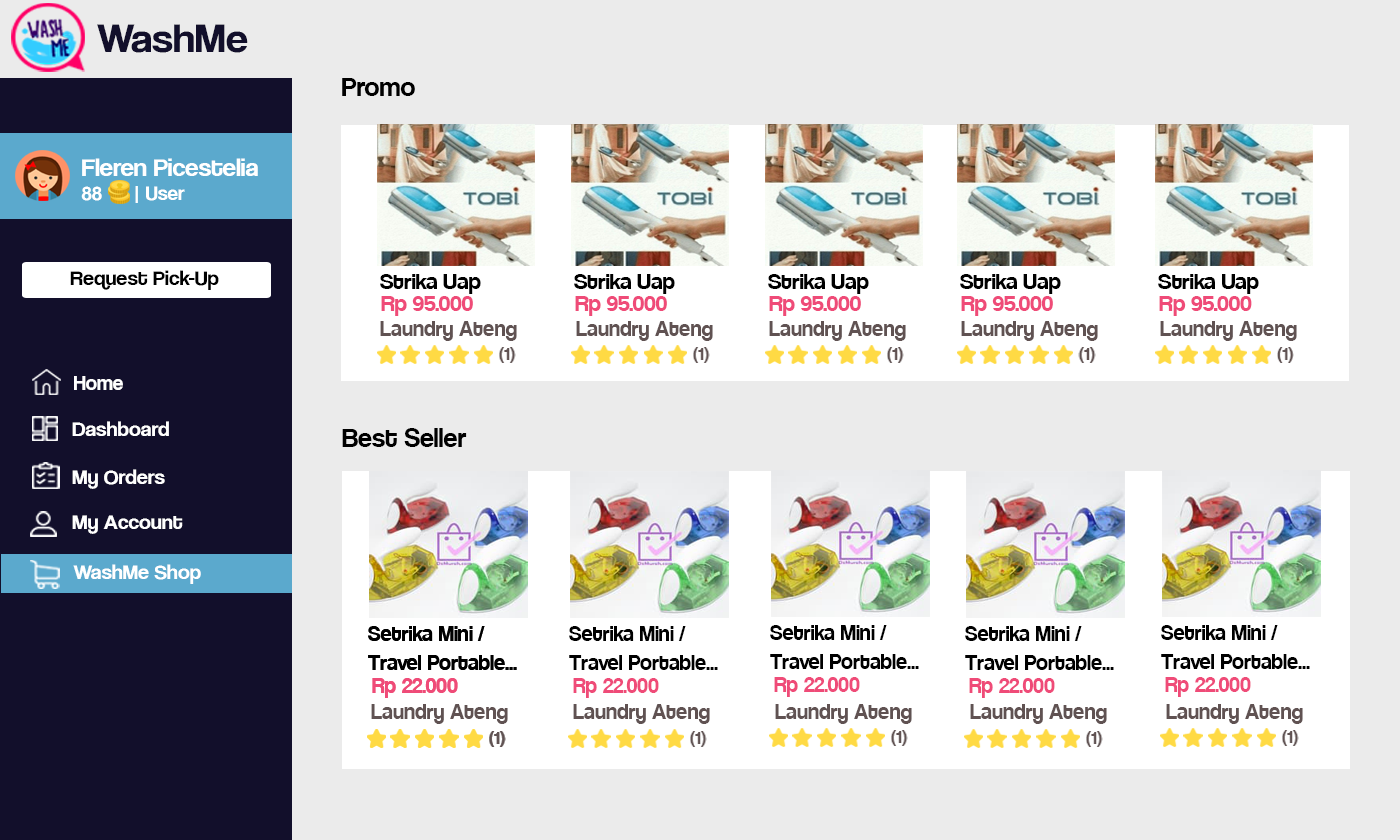
<style>
.page{position:relative;width:1400px;height:840px;background:#ebebeb}
.page>*{position:absolute;margin:0}
.t1{font:42.1px "CoolveticaRg-Regular";color:#120f2b;scale:1.05 1}
.t2{font:30px "Coolvetica-Regular";color:#000000}
.t3{font:25.2px "CoolveticaRg-Regular";color:#ffffff;scale:1.05 1}
.t4{font:20px "CoolveticaRg-Regular";color:#ffffff;scale:1.05 1}
.t5{font:21px "CoolveticaRg-Regular";color:#000000;scale:1.05 1}
.t6{font:24px "Coolvetica-Regular";color:#000000;scale:1.07 1}
.t7{font:24px "Coolvetica-Regular";color:#ef4b78;scale:1.07 1}
.t8{font:24px "Coolvetica-Regular";color:#605252}
.t9{font:18px "CoolveticaRg-Regular";color:#605252;scale:1.07 1}
.t10{font:21px "CoolveticaRg-Regular";color:#ffffff}
.t11{font:21px "CoolveticaRg-Regular";color:#ffffff;scale:1.05 1}
.t12{font:24px "Coolvetica-Regular";color:#000000}
.t13{font:24px "Coolvetica-Regular";color:#ef4b78}
</style>
<div class="page">
<p class="t1" style="left:97px;top:24px;width:151px;height:29px">WashMe</p>
<p class="t2" style="left:342px;top:78px;width:73px;height:18px">Promo</p>
<p class="t3" style="left:81px;top:158px;width:177px;height:45px">Fleren Picestelia<br><span class="t4">88      | User</span></p>
<p class="t5" style="left:70px;top:270px;width:149px;height:20px">Request Pick-Up</p>
<p class="t6" style="left:380px;top:274px;width:101px;height:20px">Strika Uap</p>
<p class="t6" style="left:574px;top:274px;width:101px;height:20px">Strika Uap</p>
<p class="t6" style="left:768px;top:274px;width:101px;height:20px">Strika Uap</p>
<p class="t6" style="left:960px;top:274px;width:101px;height:20px">Strika Uap</p>
<p class="t6" style="left:1158px;top:274px;width:101px;height:20px">Strika Uap</p>
<p class="t7" style="left:381px;top:296px;width:92px;height:20px">Rp 95.000</p>
<p class="t7" style="left:575px;top:296px;width:92px;height:20px">Rp 95.000</p>
<p class="t7" style="left:769px;top:296px;width:92px;height:20px">Rp 95.000</p>
<p class="t7" style="left:961px;top:296px;width:92px;height:20px">Rp 95.000</p>
<p class="t7" style="left:1159px;top:296px;width:93px;height:20px">Rp 95.000</p>
<p class="t8" style="left:380px;top:321px;width:137px;height:20px">Laundry Ateng</p>
<p class="t8" style="left:576px;top:321px;width:137px;height:20px">Laundry Ateng</p>
<p class="t8" style="left:769px;top:321px;width:137px;height:20px">Laundry Ateng</p>
<p class="t8" style="left:961px;top:321px;width:137px;height:20px">Laundry Ateng</p>
<p class="t8" style="left:1160px;top:321px;width:137px;height:20px">Laundry Ateng</p>
<p class="t9" style="left:499px;top:347px;width:17px;height:16px">(1)</p>
<p class="t9" style="left:693px;top:347px;width:17px;height:16px">(1)</p>
<p class="t9" style="left:887px;top:347px;width:17px;height:16px">(1)</p>
<p class="t9" style="left:1078px;top:347px;width:18px;height:16px">(1)</p>
<p class="t9" style="left:1277px;top:347px;width:17px;height:16px">(1)</p>
<p class="t10" style="left:74px;top:376px;width:49px;height:14px">Home</p>
<p class="t11" style="left:72px;top:421px;width:97px;height:15px">Dashboard</p>
<p class="t2" style="left:342px;top:428px;width:125px;height:19px">Best Seller</p>
<p class="t11" style="left:72px;top:469px;width:93px;height:20px">My Orders</p>
<p class="t11" style="left:72px;top:515px;width:111px;height:19px">My Account</p>
<p class="t11" style="left:73px;top:564px;width:128px;height:20px">WashMe Shop</p>
<p class="t12" style="left:368px;top:626px;width:149px;height:44px">Setrika Mini / <br>Travel Portable...</p>
<p class="t12" style="left:368px;top:626px;width:149px;height:44px">Setrika Mini / <br>Travel Portable...</p>
<p class="t12" style="left:569px;top:626px;width:149px;height:44px">Setrika Mini / <br>Travel Portable...</p>
<p class="t12" style="left:770px;top:625px;width:149px;height:44px">Setrika Mini / <br>Travel Portable...</p>
<p class="t12" style="left:965px;top:626px;width:149px;height:44px">Setrika Mini / <br>Travel Portable...</p>
<p class="t12" style="left:1161px;top:625px;width:149px;height:44px">Setrika Mini / <br>Travel Portable...</p>
<p class="t13" style="left:372px;top:678px;width:86px;height:20px">Rp 22.000</p>
<p class="t13" style="left:372px;top:678px;width:86px;height:20px">Rp 22.000</p>
<p class="t13" style="left:573px;top:678px;width:86px;height:20px">Rp 22.000</p>
<p class="t13" style="left:774px;top:677px;width:86px;height:20px">Rp 22.000</p>
<p class="t13" style="left:969px;top:678px;width:86px;height:20px">Rp 22.000</p>
<p class="t13" style="left:1165px;top:677px;width:86px;height:20px">Rp 22.000</p>
<p class="t8" style="left:371px;top:704px;width:137px;height:20px">Laundry Ateng</p>
<p class="t8" style="left:573px;top:704px;width:137px;height:20px">Laundry Ateng</p>
<p class="t8" style="left:775px;top:704px;width:137px;height:20px">Laundry Ateng</p>
<p class="t8" style="left:970px;top:704px;width:137px;height:20px">Laundry Ateng</p>
<p class="t8" style="left:1166px;top:704px;width:137px;height:20px">Laundry Ateng</p>
<p class="t9" style="left:489px;top:731px;width:17px;height:16px">(1)</p>
<p class="t9" style="left:489px;top:731px;width:17px;height:16px">(1)</p>
<p class="t9" style="left:690px;top:731px;width:17px;height:16px">(1)</p>
<p class="t9" style="left:891px;top:730px;width:17px;height:16px">(1)</p>
<p class="t9" style="left:1086px;top:731px;width:17px;height:16px">(1)</p>
<p class="t9" style="left:1282px;top:730px;width:17px;height:16px">(1)</p>
</div>
